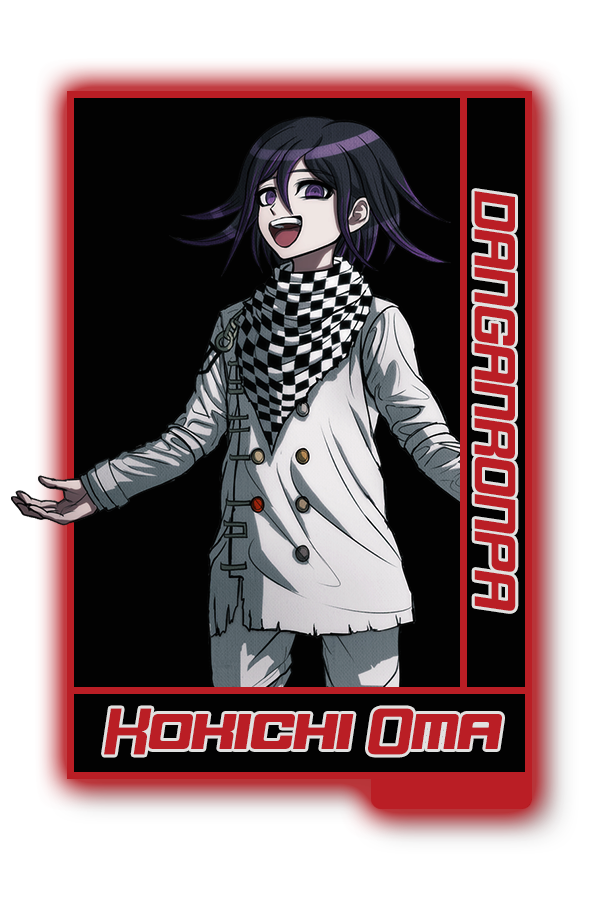
<style>
.page{position:relative;width:600px;height:900px;background:#020202}
.page>*{position:absolute;margin:0}
.t1{font:48.8px "DorBlue";color:#bb2c2e}
.t2{font:55.4px "DorBlue";color:#bb2c2e}
</style>
<div class="page">
<p class="t1" style="left:474px;top:191px;width:42px;height:420px;rotate:90deg">DANGANRONPA</p>
<p class="t2" style="left:104px;top:708px;width:398px;height:47px">Kokichi Oma</p>
</div>
